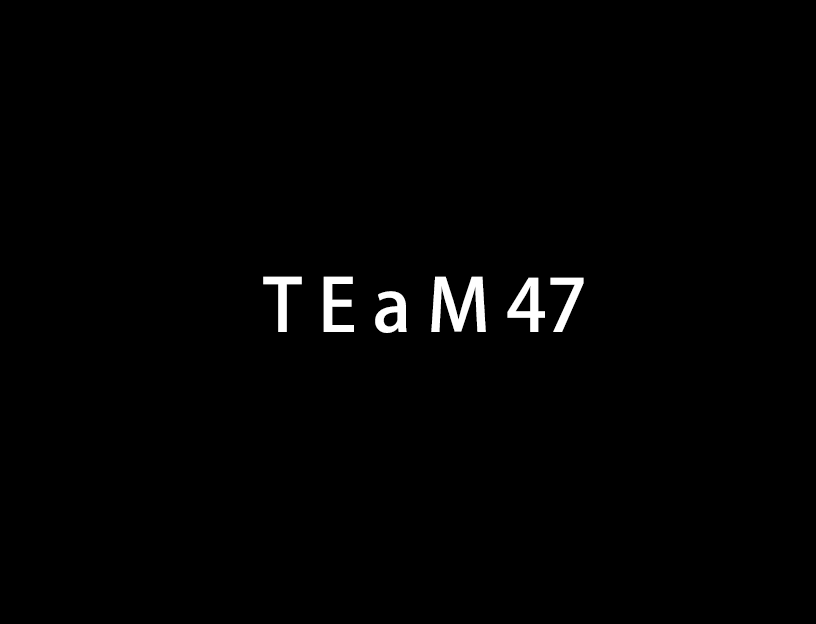
<style>
.page{position:relative;width:816px;height:624px;background:#000000}
.page>*{position:absolute;margin:0}
.t1{font:72px "AdobeHeitiStd-Regular";color:#ffffff}
</style>
<div class="page">
<p class="t1" style="left:263px;top:276px;width:321px;height:57px">T E a M 47</p>
</div>
